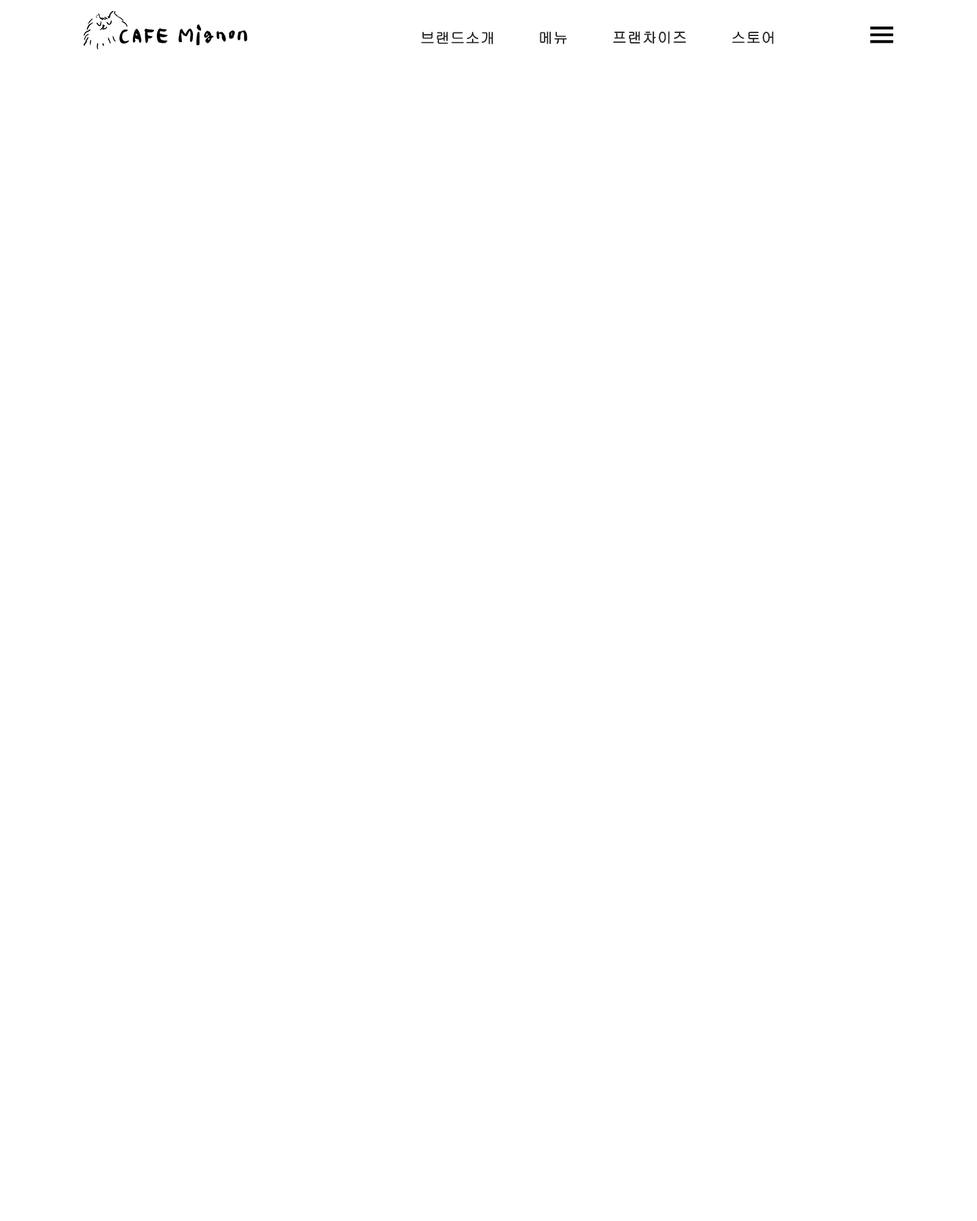
<style>
.page{position:relative;width:977px;height:1221px;background:#ffffff}
.page>*{position:absolute;margin:0}
.t1{font:14.7px "Gulim";color:#292828;font-weight:bold}
</style>
<div class="page">
<p class="t1" style="left:421px;top:32px;width:72px;height:13px">브랜드소개</p>
<p class="t1" style="left:540px;top:31px;width:27px;height:14px">메뉴</p>
<p class="t1" style="left:613px;top:31px;width:73px;height:13px">프랜차이즈</p>
<p class="t1" style="left:732px;top:31px;width:41px;height:13px">스토어</p>
</div>
